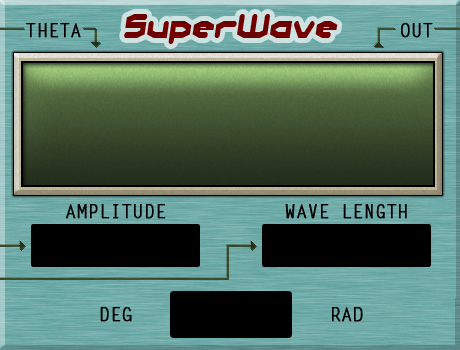
<style>
.page{position:relative;width:460px;height:350px}
.page>*{position:absolute;margin:0}
.t1{font:36px "CharlesinCharge";color:#700000;font-style:italic;scale:0.84 1}
.t2{font:18px "LetterGothicStd";color:#000000;font-weight:bold}
</style>
<div class="page">
<p class="t1" style="left:124px;top:14px;width:214px;height:30px">SuperWave</p>
<p class="t2" style="left:26px;top:23px;width:55px;height:15px">THETA</p>
<p class="t2" style="left:401px;top:23px;width:32px;height:15px">OUT</p>
<p class="t2" style="left:66px;top:204px;width:100px;height:15px">AMPLITUDE</p>
<p class="t2" style="left:285px;top:204px;width:122px;height:15px">WAVE LENGTH</p>
<p class="t2" style="left:100px;top:307px;width:32px;height:15px">DEG</p>
<p class="t2" style="left:332px;top:307px;width:31px;height:15px">RAD</p>
</div>
